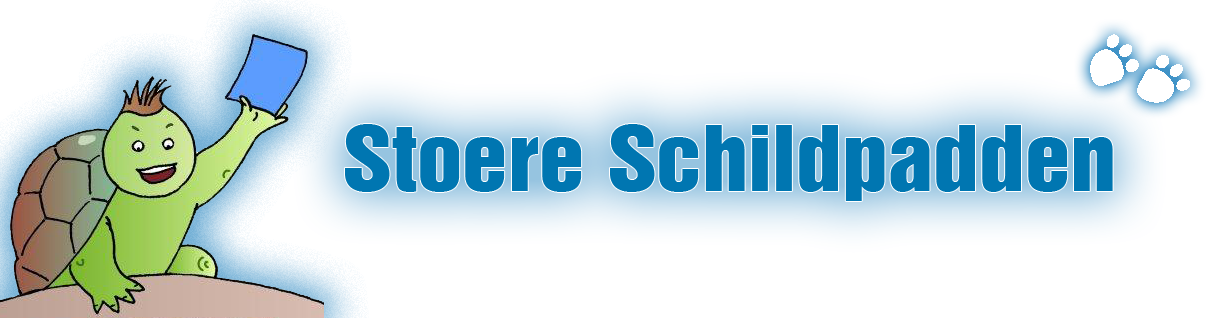
<style>
.page{position:relative;width:1221px;height:318px;background:#ffffff}
.page>*{position:absolute;margin:0}
.t1{font:82.3px "Swiss921BT-RegularA";color:#0076b1;scale:1.13 1}
</style>
<div class="page">
<p class="t1" style="left:345px;top:124px;width:768px;height:77px">Stoere Schildpadden</p>
</div>
